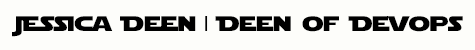
<style>
.page{position:relative;width:475px;height:50px;background:#fdfdfa}
.page>*{position:absolute;margin:0}
.t1{font:20.8px "StarJedi";color:#000000;scale:1.22 1}
.t2{font:20.8px "Helvetica";color:#000000}
</style>
<div class="page">
<p class="t1" style="left:12px;top:16px;width:451px;height:21px">Jessica Deen  Deen of Devops</p>
<p class="t2" style="left:205px;top:16px;width:3px;height:15px">|</p>
</div>
